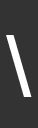
<style>
.page{position:relative;width:38px;height:128px;background:#333333}
.page>*{position:absolute;margin:0}
.t1{font:75px "AdobeGothicStd-Bold";color:#ffffff}
</style>
<div class="page">
<p class="t1" style="left:6px;top:35px;width:26px;height:62px">\</p>
</div>
